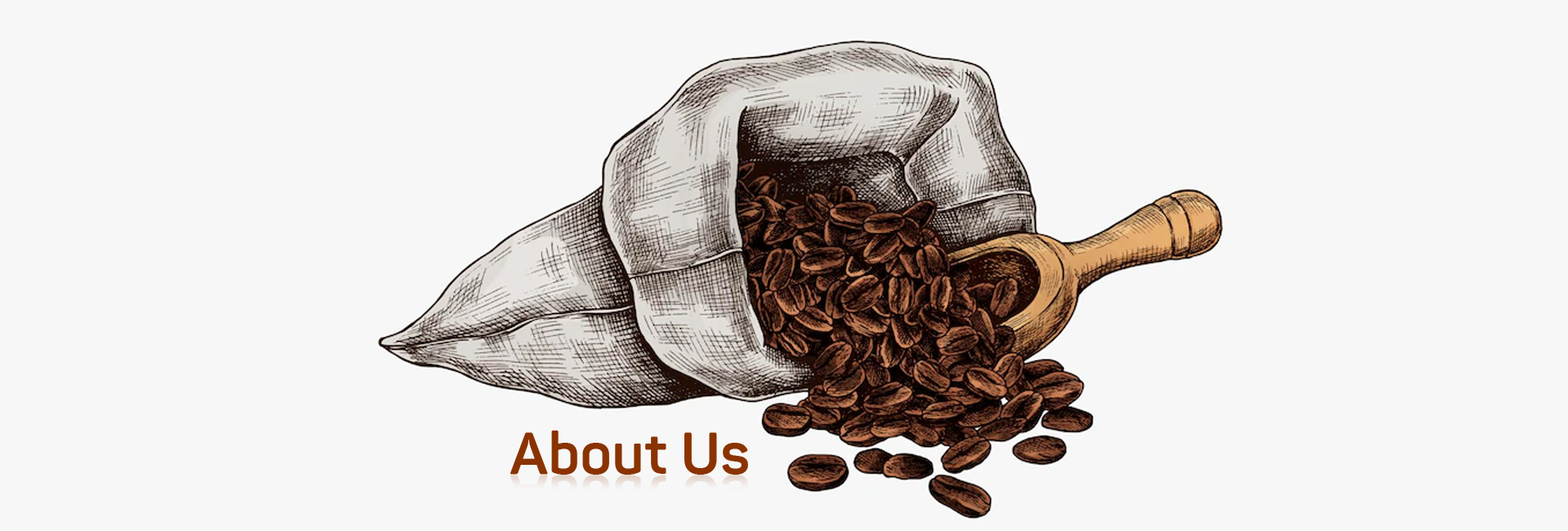
<style>
.page{position:relative;width:1568px;height:531px;background:#f7f7f7}
.page>*{position:absolute;margin:0}
.t1{font:57.5px "Panton-Trial-Bold";color:#8a3300}
</style>
<div class="page">
<p class="t1" style="left:510px;top:430px;width:238px;height:44px">About Us</p>
</div>
